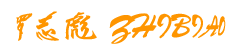
<style>
.page{position:relative;width:232px;height:48px;background:#ffffff}
.page>*{position:absolute;margin:0}
.t1{font:30px "STXingkai";color:#fe9500;text-transform:uppercase}
</style>
<div class="page">
<p class="t1" style="left:16px;top:11px;width:210px;height:33px">罗志彪 ZhiBiao</p>
</div>
